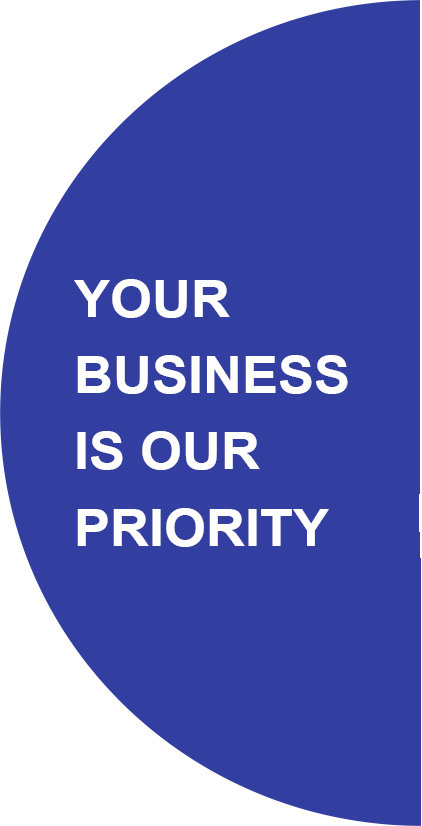
<style>
.page{position:relative;width:422px;height:826px;background:#333ea1}
.page>*{position:absolute;margin:0}
.t1{font:51px/76.4px "Arial-BoldMT";color:#ffffff;scale:1.06 1}
</style>
<div class="page">
<p class="t1" style="left:74px;top:279px;width:274px;height:268px">YOUR<br>BUSINESS<br>IS OUR<br>PRIORITY</p>
</div>
